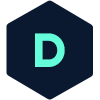
<style>
.page{position:relative;width:100px;height:100px;background:#0a192f}
.page>*{position:absolute;margin:0}
.t1{font:48px "Gilroy-ExtraBold";color:#64ffda}
</style>
<div class="page">
<p class="t1" style="left:35px;top:33px;width:30px;height:34px">D</p>
</div>
